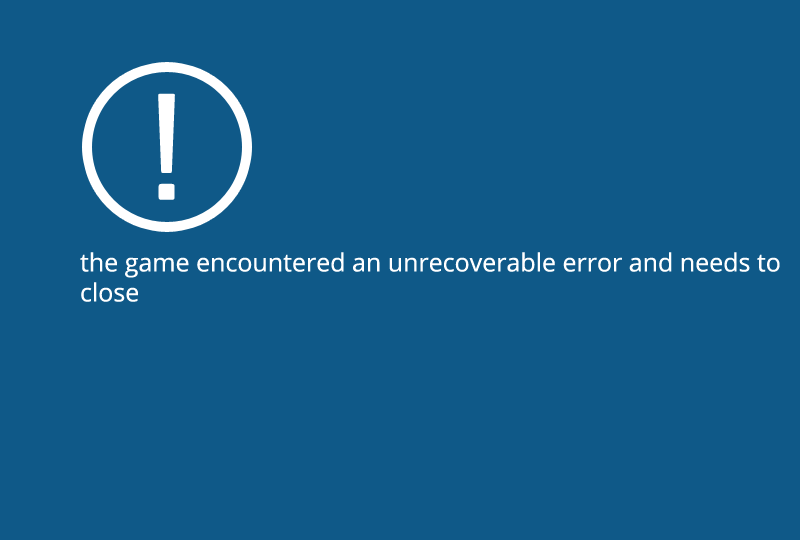
<style>
.page{position:relative;width:800px;height:540px;background:#0f5988}
.page>*{position:absolute;margin:0}
.t1{font:25px "OpenSans";color:#ffffff}
</style>
<div class="page">
<p class="t1" style="left:80px;top:252px;width:700px;height:50px">the game encountered an unrecoverable error and needs to<br>close</p>
</div>
